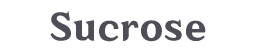
<style>
.page{position:relative;width:256px;height:56px;background:#ffffff}
.page>*{position:absolute;margin:0}
.t1{font:36px "HYWenHei-HEW";color:#4f4e57}
</style>
<div class="page">
<p class="t1" style="left:50px;top:11px;width:156px;height:31px">Sucrose</p>
</div>
